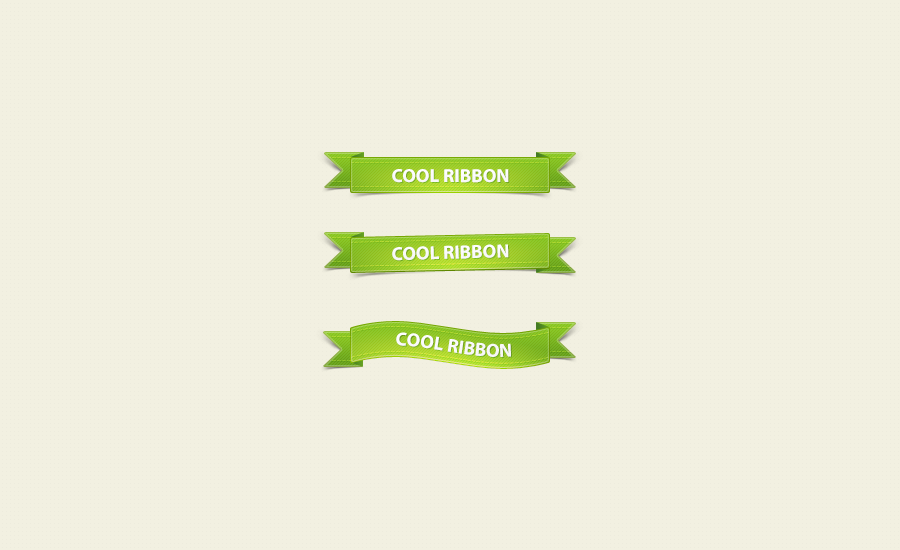
<style>
.page{position:relative;width:900px;height:550px;background:#f2f0e1}
.page>*{position:absolute;margin:0}
.t1{font:19px "MyriadPro-Bold";color:#fafafa}
.t2{font:19px "MyriadPro-Bold";color:#f9f9f9}
</style>
<div class="page">
<p class="t1" style="left:392px;top:169px;width:117px;height:14px">COOL RIBBON</p>
<p class="t1" style="left:392px;top:244px;width:117px;height:17px;rotate:-2deg">COOL RIBBON</p>
<p class="t2" style="left:396px;top:332px;width:115px;height:25px">COOL RIBBON</p>
</div>
